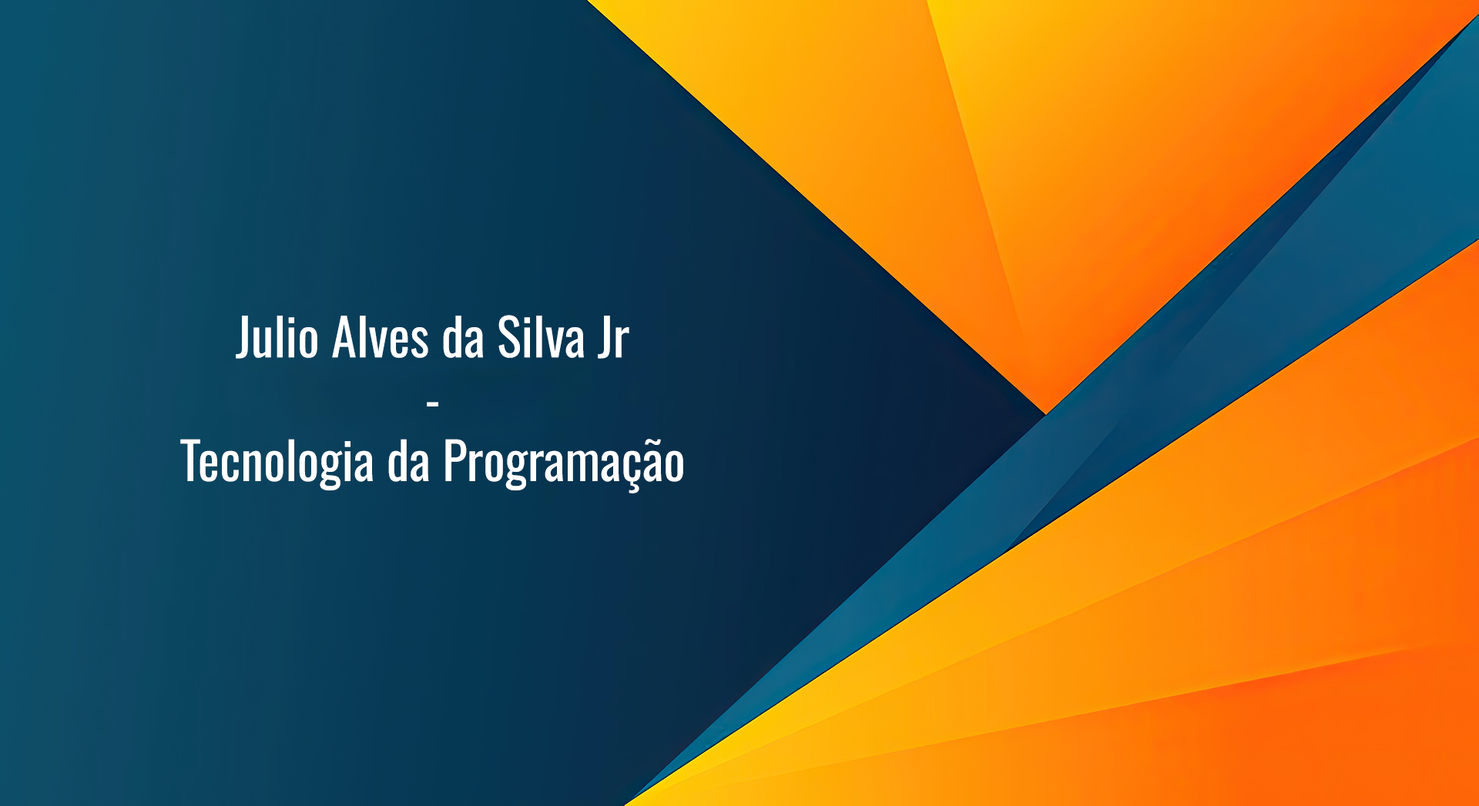
<style>
.page{position:relative;width:1479px;height:806px}
.page>*{position:absolute;margin:0}
.t1{font:51.6px "Oswald-Regular";color:#ffffff}
</style>
<div class="page">
<p class="t1" style="left:180px;top:315px;width:503px;height:179px;text-align:center">Julio Alves da Silva Jr<br>-<br>Tecnologia da Programação</p>
</div>
